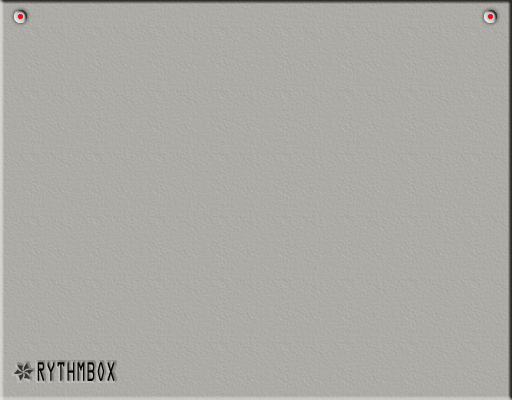
<style>
.page{position:relative;width:512px;height:400px}
.page>*{position:absolute;margin:0}
.t1{font:28.8px "OCRAExtended";color:#060606;scale:0.57 1}
</style>
<div class="page">
<p class="t1" style="left:37px;top:362px;width:78px;height:19px">RYTHMBOX</p>
</div>
